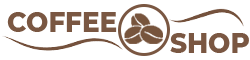
<style>
.page{position:relative;width:250px;height:60px;background:#ffffff}
.page>*{position:absolute;margin:0}
.t1{font:28px "Montserrat-ExtraBold";color:#7a5742;scale:0.94 1}
</style>
<div class="page">
<p class="t1" style="left:7px;top:12px;width:110px;height:20px">COFFEE</p>
<p class="t1" style="left:170px;top:33px;width:79px;height:20px">SHOP</p>
</div>
